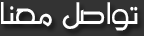
<style>
.page{position:relative;width:144px;height:36px;background:#333333}
.page>*{position:absolute;margin:0}
.t1{font:44.6px "MO_Nawel";letter-spacing:-0.08em;color:#ffffff;scale:0.93 1}
</style>
<div class="page">
<p class="t1" style="left:1px;top:2px;width:137px;height:29px">تو ا صل   معنا</p>
</div>
